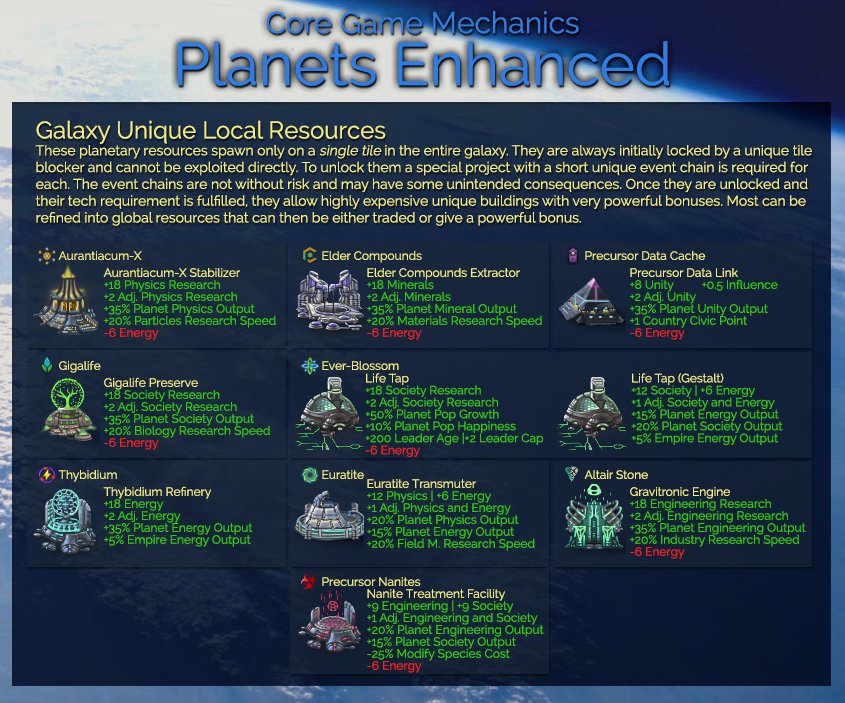
<style>
.page{position:relative;width:845px;height:703px}
.page>*{position:absolute;margin:0}
.t1{font:30px/52px "Raleway";color:#2d7de4}
.t2{font:60px/52px "Raleway";color:#2d7de4}
.t3{font:14px "Raleway";color:#f4ed81}
.t4{font:24px "Raleway";color:#f4ed81}
.t5{font:14px "Raleway";color:#f4ed81;font-style:italic}
.t6{font:12px "Raleway";color:#f4ed81}
.t7{font:12px/12px "Raleway";color:#31cf00}
.t8{font:12px/12px "Raleway";color:#f4ed81}
.t9{font:12px/12px "Raleway";color:#fc1e1e}
</style>
<div class="page">
<p class="t1" style="left:178px;top:11px;width:491px;height:75px;text-align:center">Core Game Mechanics<br><span class="t2">Planets Enhanced</span></p>
<p class="t3" style="left:35px;top:120px;width:777px;height:106px"><span class="t4">Galaxy Unique Local Resources<br></span>These planetary resources spawn only on a <span class="t5">single tile</span> in the entire galaxy. They are always initially locked by a unique tile blocker and cannot be exploited directly. To unlock them a special project with a short unique event chain is required for each. The event chains are not without risk and may have some unintended consequences. Once they are unlocked and their tech requirement is fulfilled, they allow highly expensive unique buildings with very powerful bonuses. Most can be refined into global resources that can then be either traded or give a powerful bonus.</p>
<p class="t6" style="left:58px;top:251px;width:84px;height:9px">Aurantiacum-X</p>
<p class="t6" style="left:322px;top:251px;width:100px;height:12px">Elder Compounds</p>
<p class="t6" style="left:585px;top:251px;width:121px;height:9px">Precursor Data Cache</p>
<p class="t7" style="left:103px;top:268px;width:173px;height:72px"><span class="t8">Aurantiacum-X Stabilizer<br></span>+18 Physics Research<br>+2 Adj. Physics Research<br>+35% Planet Physics Output<br>+20% Particles Research Speed<br><span class="t9">-6 Energy</span></p>
<p class="t7" style="left:367px;top:268px;width:175px;height:72px"><span class="t8">Elder Compounds Extractor<br></span>+18 Minerals<br>+2 Adj. Minerals<br>+35% Planet Mineral Output<br>+20% Materials Research Speed<br><span class="t9">-6 Energy</span></p>
<p class="t7" style="left:630px;top:268px;width:148px;height:72px"><span class="t8">Precursor Data Link<br></span>+8 Unity +0.5 Influence<br>+2 Adj. Unity<br>+35% Planet Unity Output<br>+1 Country Civic Point<br><span class="t9">-6 Energy</span></p>
<p class="t6" style="left:59px;top:360px;width:42px;height:13px">Gigalife</p>
<p class="t6" style="left:322px;top:361px;width:77px;height:9px">Ever-Blossom</p>
<p class="t7" style="left:104px;top:377px;width:166px;height:73px"><span class="t8">Gigalife Preserve<br></span>+18 Society Research<br>+2 Adj. Society Research<br>+35% Planet Society Output<br>+20% Biology Research Speed<br><span class="t9">-6 Energy</span></p>
<p class="t7" style="left:365px;top:373px;width:179px;height:84px"><span class="t8">Life Tap<br></span>+18 Society Research<br>+2 Adj. Society Research<br>+50% Planet Pop Growth<br>+10% Planet Pop Happiness<br>+200 Leader Age |+2 Leader Cap<br><span class="t9">-6 Energy</span></p>
<p class="t7" style="left:631px;top:373px;width:152px;height:72px"><span class="t8">Life Tap (Gestalt)<br></span>+12 Society | +6 Energy<br>+1 Adj. Society and Energy<br>+15% Planet Energy Output<br>+20% Planet Society Output<br>+5% Empire Energy Output</p>
<p class="t6" style="left:58px;top:470px;width:59px;height:12px">Thybidium</p>
<p class="t6" style="left:322px;top:470px;width:42px;height:9px">Euratite</p>
<p class="t6" style="left:584px;top:470px;width:64px;height:9px">Altair Stone</p>
<p class="t7" style="left:103px;top:486px;width:150px;height:61px"><span class="t8">Thybidium Refinery<br></span>+18 Energy<br>+2 Adj. Energy<br>+35% Planet Energy Output<br>+5% Empire Energy Output</p>
<p class="t7" style="left:367px;top:479px;width:168px;height:72px"><span class="t8">Euratite Transmuter<br></span>+12 Physics | +6 Energy<br>+1 Adj. Physics and Energy<br>+20% Planet Physics Output<br>+15% Planet Energy Output<br>+20% Field M. Research Speed</p>
<p class="t7" style="left:630px;top:487px;width:176px;height:72px"><span class="t8">Gravitronic Engine<br></span>+18 Engineering Research<br>+2 Adj. Engineering Research<br>+35% Planet Engineering Output<br>+20% Industry Research Speed<br><span class="t9">-6 Energy</span></p>
<p class="t6" style="left:322px;top:577px;width:99px;height:9px">Precursor Nanites</p>
<p class="t7" style="left:367px;top:589px;width:177px;height:84px"><span class="t8">Nanite Treatment Facility<br></span>+9 Engineering | +9 Society<br>+1 Adj. Engineering and Society<br>+20% Planet Engineering Output<br>+15% Planet Society Output<br>-25% Modify Species Cost<br><span class="t9">-6 Energy</span></p>
</div>
